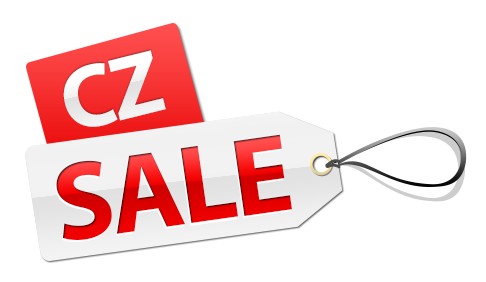
<style>
.page{position:relative;width:486px;height:282px;background:#ffffff}
.page>*{position:absolute;margin:0}
.t1{font:90px "MyriadPro-Bold";letter-spacing:-0.035em;color:#f3f3f3}
.t2{font:111.9px "MyriadPro-Bold";letter-spacing:-0.035em}
</style>
<div class="page">
<p class="t1" style="left:63px;top:50px;width:103px;height:77px;rotate:-14deg">CZ</p>
<p class="t2" style="left:55px;top:136px;width:236px;height:106px;rotate:-8deg">SALE</p>
<p class="t2" style="left:56px;top:134px;width:236px;height:106px;rotate:-8deg">SALE</p>
</div>
